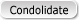
<style>
.page{position:relative;width:79px;height:20px}
.page>*{position:absolute;margin:0}
.t1{font:11px "Verdana";color:#000000;scale:0.9 1}
</style>
<div class="page">
<p class="t1" style="left:10px;top:5px;width:58px;height:10px">Condolidate</p>
</div>
